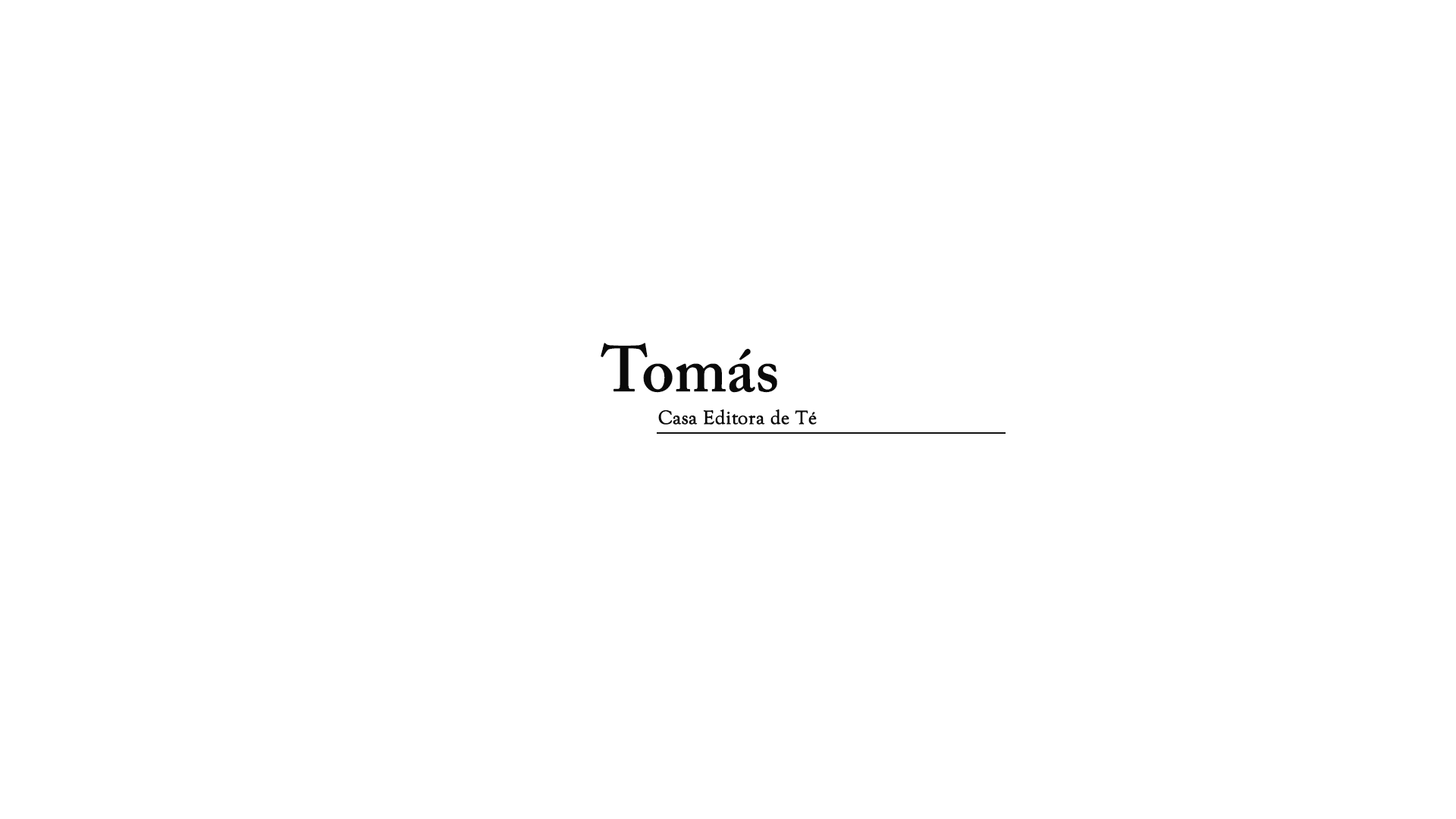
<style>
.page{position:relative;width:1456px;height:819px;background:#ffffff}
.page>*{position:absolute;margin:0}
.t1{font:64.5px "ACaslonPro-Semibold";color:#0a0a0a}
.t2{font:19.7px "GoudyOldStyleT-Regular";color:#0a0a0a;font-weight:bold}
</style>
<div class="page">
<p class="t1" style="left:601px;top:343px;width:176px;height:50px">Tomás</p>
<p class="t2" style="left:658px;top:409px;width:159px;height:16px">Casa Editora de Té</p>
</div>
